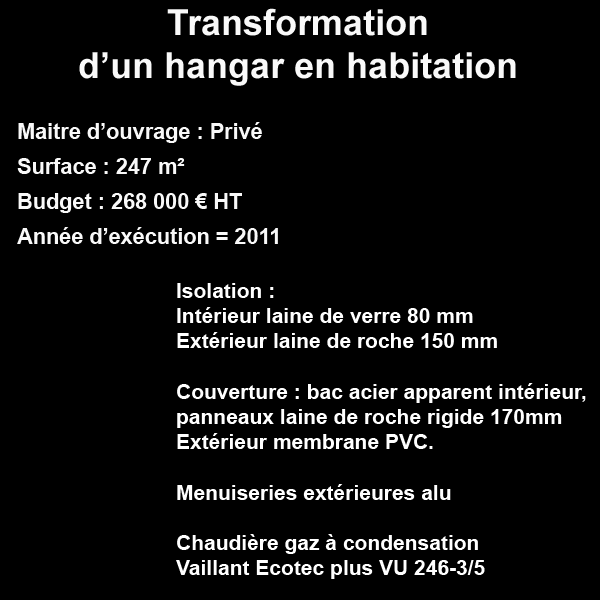
<style>
.page{position:relative;width:600px;height:600px;background:#000000}
.page>*{position:absolute;margin:0}
.t1{font:36px "Arial-BoldMT";color:#f9f9f9}
.t2{font:21.7px/35px "Arial-BoldMT";color:#f9f9f9}
.t3{font:21px "Arial-BoldMT";color:#ffffff}
</style>
<div class="page">
<p class="t1" style="left:79px;top:8px;width:437px;height:78px;text-align:center">Transformation <br>d’un hangar en habitation</p>
<p class="t2" style="left:17px;top:122px;width:261px;height:122px">Maitre d’ouvrage : Privé<br>Surface : 247 m²<br>Budget : 268 000 € HT<br>Année d’exécution = 2011</p>
<p class="t3" style="left:176px;top:283px;width:410px;height:296px">Isolation :<br>Intérieur laine de verre 80 mm<br>Extérieur laine de roche 150 mm<br><br>Couverture : bac acier apparent intérieur, panneaux laine de roche rigide 170mm<br>Extérieur membrane PVC.<br><br>Menuiseries extérieures alu<br><br>Chaudière gaz à condensation<br>Vaillant Ecotec plus VU 246-3/5</p>
</div>
